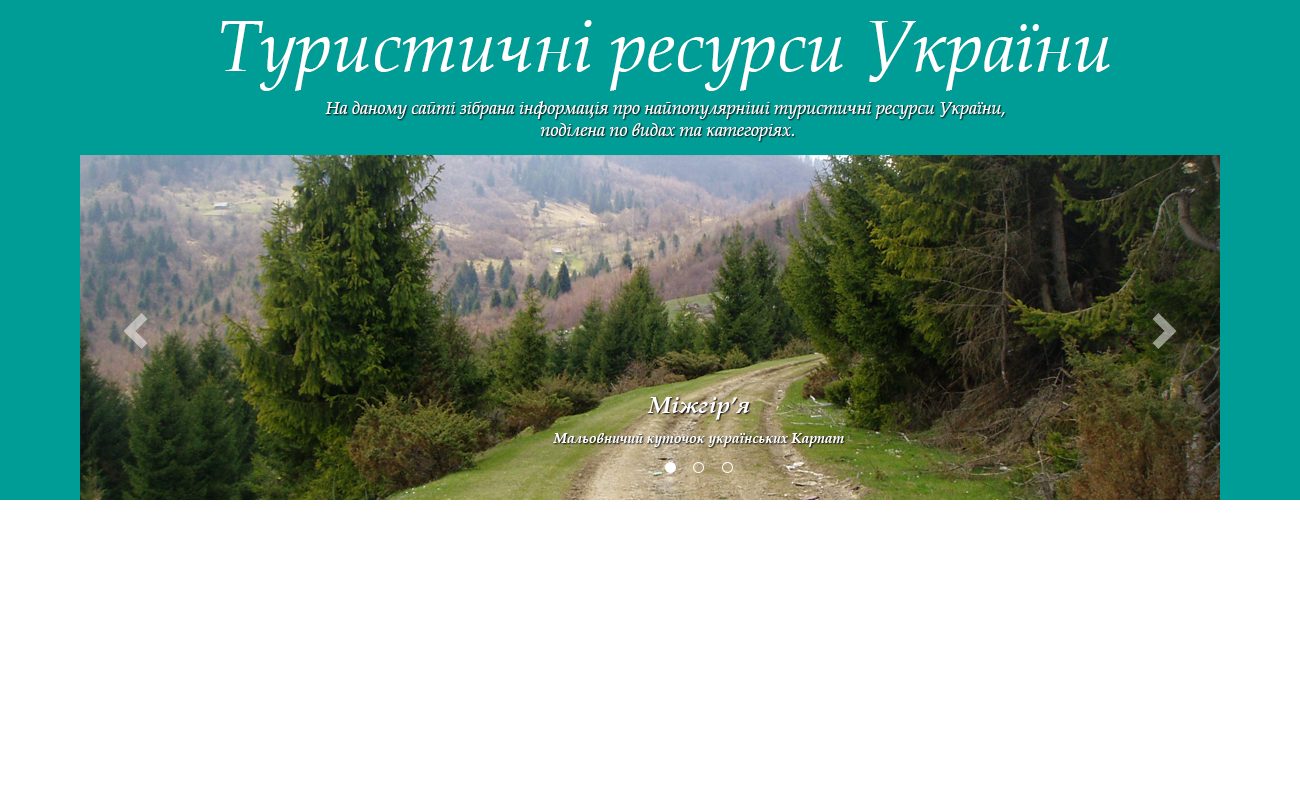
<style>
.page{position:relative;width:1300px;height:800px;background:#ffffff}
.page>*{position:absolute;margin:0}
.t1{font:72px "BookAntiqua-Italic";color:#ffffff}
.t2{font:18px "BookAntiqua-Italic";color:#ffffff}
.t3{font:14px/30px "BookAntiqua-BoldItalic";color:#ffffff}
.t4{font:24px/30px "BookAntiqua-BoldItalic";color:#ffffff}
</style>
<div class="page">
<p class="t1" style="left:221px;top:20px;width:889px;height:71px">Туристичні ресурси України</p>
<p class="t2" style="left:325px;top:101px;width:680px;height:40px;text-align:center">На даному сайті зібрана інформація про найпопулярніші туристичні ресурси України, <br>поділена по видах та категоріях.</p>
<p class="t3" style="left:553px;top:397px;width:291px;height:50px;text-align:center"><span class="t4">Міжгір’я<br></span>Мальовничий куточок українських Карпат</p>
</div>
